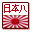
<style>
.page{position:relative;width:33px;height:32px;background:#ffffff}
.page>*{position:absolute;margin:0}
.t1{font:10.4px "SimSun";letter-spacing:-0.25em;color:#ae0012}
</style>
<div class="page">
<p class="t1" style="left:4px;top:4px;width:23px;height:9px">日本八</p>
</div>
